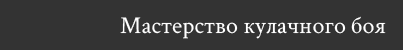
<style>
.page{position:relative;width:403px;height:50px;background:#333333}
.page>*{position:absolute;margin:0}
.t1{font:24px "CrimsonText-Regular";color:#ffffff}
</style>
<div class="page">
<p class="t1" style="left:120px;top:16px;width:266px;height:23px">Мастерство кулачного боя</p>
</div>
